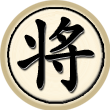
<style>
.page{position:relative;width:110px;height:110px}
.page>*{position:absolute;margin:0}
.t1{font:83.8px "AdobeKaitiStd-Regular";color:#000000}
</style>
<div class="page">
<p class="t1" style="left:18px;top:17px;width:76px;height:74px">将</p>
</div>
